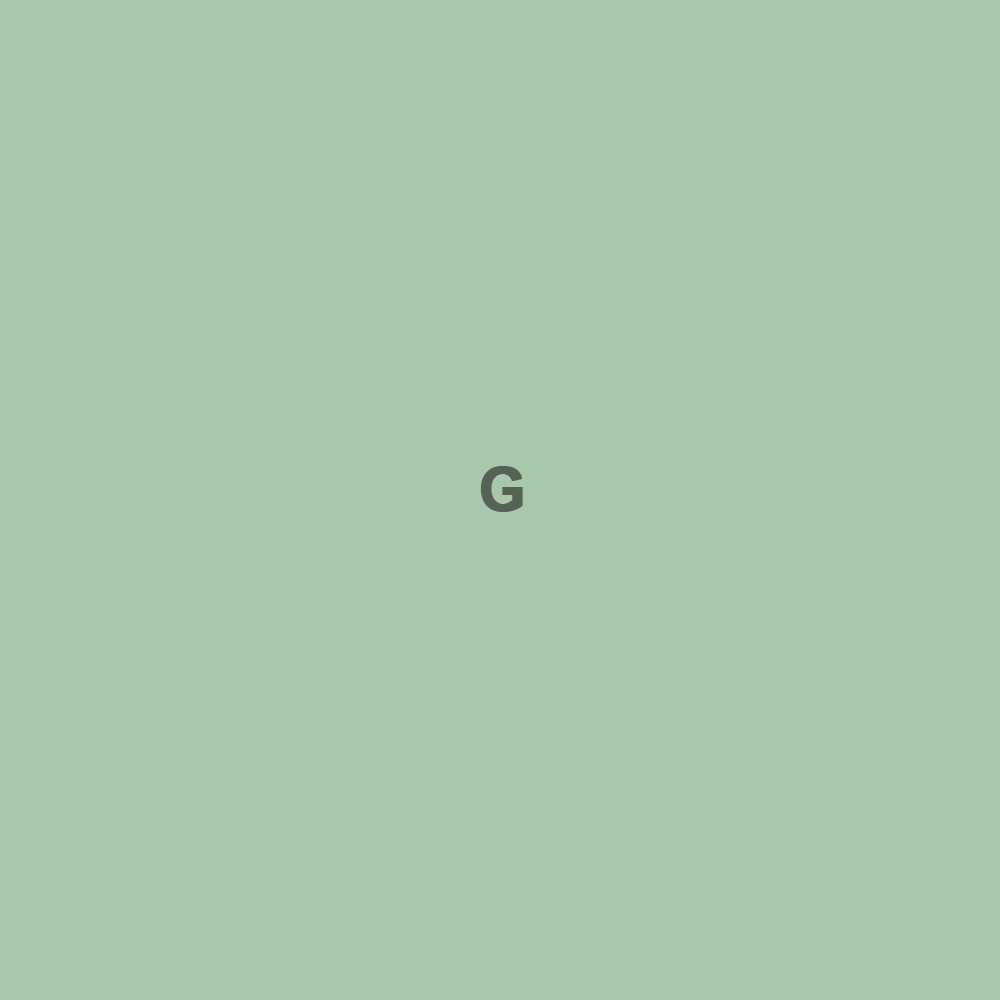
<style>
.page{position:relative;width:1000px;height:1000px;background:#abc7ab}
.page>*{position:absolute;margin:0}
.t1{font:60px "Arial-BoldMT";color:#556355;font-weight:bold}
</style>
<div class="page">
<p class="t1" style="left:480px;top:466px;width:43px;height:46px">G</p>
</div>
